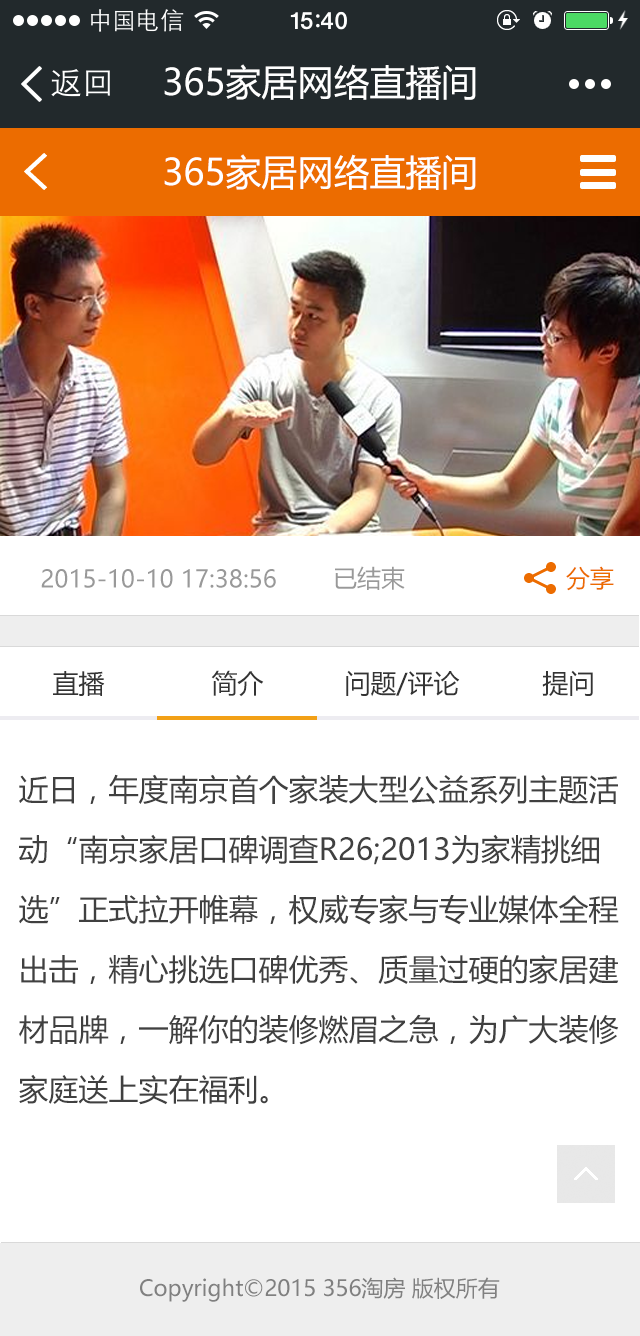
<style>
.page{position:relative;width:640px;height:1336px;background:#ffffff}
.page>*{position:absolute;margin:0}
.t1{font:36px "MicrosoftYaHei";color:#ffffff}
.t2{font:24px "MicrosoftYaHei";color:#999999}
.t3{font:24px "MicrosoftYaHei";color:#ec6c00}
.t4{font:26px "MicrosoftYaHei";color:#333333}
.t5{font:30px/60px "MicrosoftYaHei";color:#404040}
.t6{font:22px "MicrosoftYaHei";color:#808080}
</style>
<div class="page">
<p class="t1" style="left:164px;top:64px;width:312px;height:36px">365家居网络直播间</p>
<p class="t1" style="left:164px;top:154px;width:312px;height:36px">365家居网络直播间</p>
<p class="t2" style="left:41px;top:569px;width:235px;height:19px">2015-10-10 17:38:56</p>
<p class="t2" style="left:335px;top:566px;width:70px;height:24px">已结束</p>
<p class="t3" style="left:566px;top:566px;width:48px;height:25px">分享</p>
<p class="t4" style="left:53px;top:671px;width:52px;height:25px">直播</p>
<p class="t4" style="left:211px;top:670px;width:53px;height:27px">简介</p>
<p class="t4" style="left:346px;top:670px;width:114px;height:27px">问题/评论</p>
<p class="t4" style="left:542px;top:670px;width:51px;height:26px">提问</p>
<p class="t5" style="left:19px;top:774px;width:600px;height:331px">近日，年度南京首个家装大型公益系列主题活动“南京家居口碑调查R26;2013为家精挑细选”正式拉开帷幕，权威专家与专业媒体全程出击，精心挑选口碑优秀、质量过硬的家居建材品牌，一解你的装修燃眉之急，为广大装修家庭送上实在福利。</p>
<p class="t6" style="left:140px;top:1277px;width:360px;height:25px">Copyright©2015 356淘房 版权所有</p>
</div>
